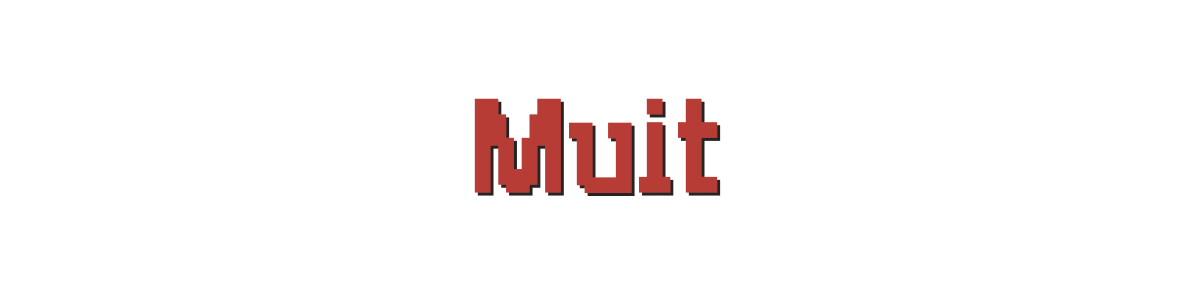
<style>
.page{position:relative;width:1200px;height:296px;background:#ffffff}
.page>*{position:absolute;margin:0}
.t1{font:125px "OldGameFatty";color:#b73c35}
</style>
<div class="page">
<p class="t1" style="left:474px;top:98px;width:244px;height:95px">Muit</p>
</div>
